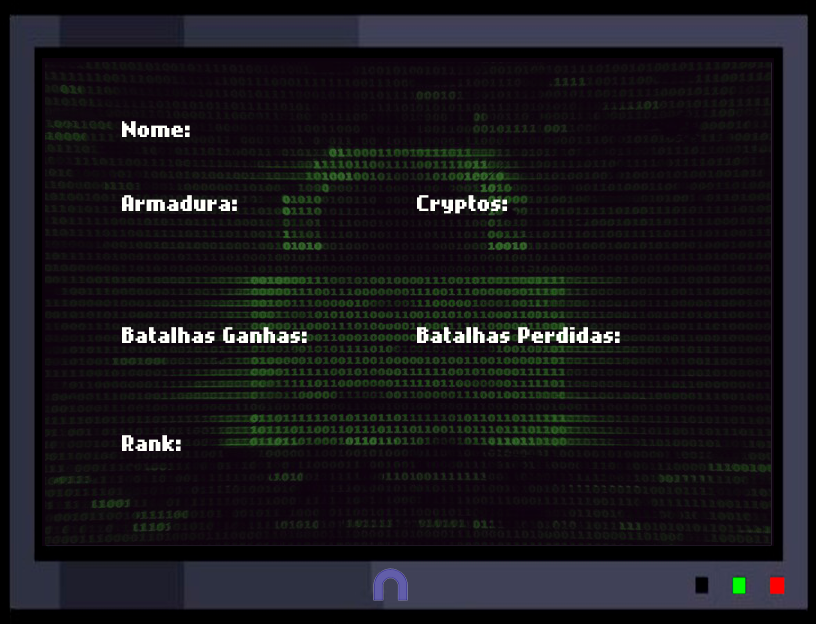
<style>
.page{position:relative;width:816px;height:624px}
.page>*{position:absolute;margin:0}
.t1{font:18px "NokiaCellphoneFC-Small";color:#fffffb}
</style>
<div class="page">
<p class="t1" style="left:122px;top:121px;width:68px;height:16px">Nome:</p>
<p class="t1" style="left:122px;top:195px;width:115px;height:16px">Armadura:</p>
<p class="t1" style="left:417px;top:195px;width:90px;height:19px">Cryptos:</p>
<p class="t1" style="left:122px;top:327px;width:185px;height:16px">Batalhas Ganhas:</p>
<p class="t1" style="left:417px;top:327px;width:203px;height:16px">Batalhas Perdidas:</p>
<p class="t1" style="left:122px;top:435px;width:59px;height:16px">Rank:</p>
</div>
